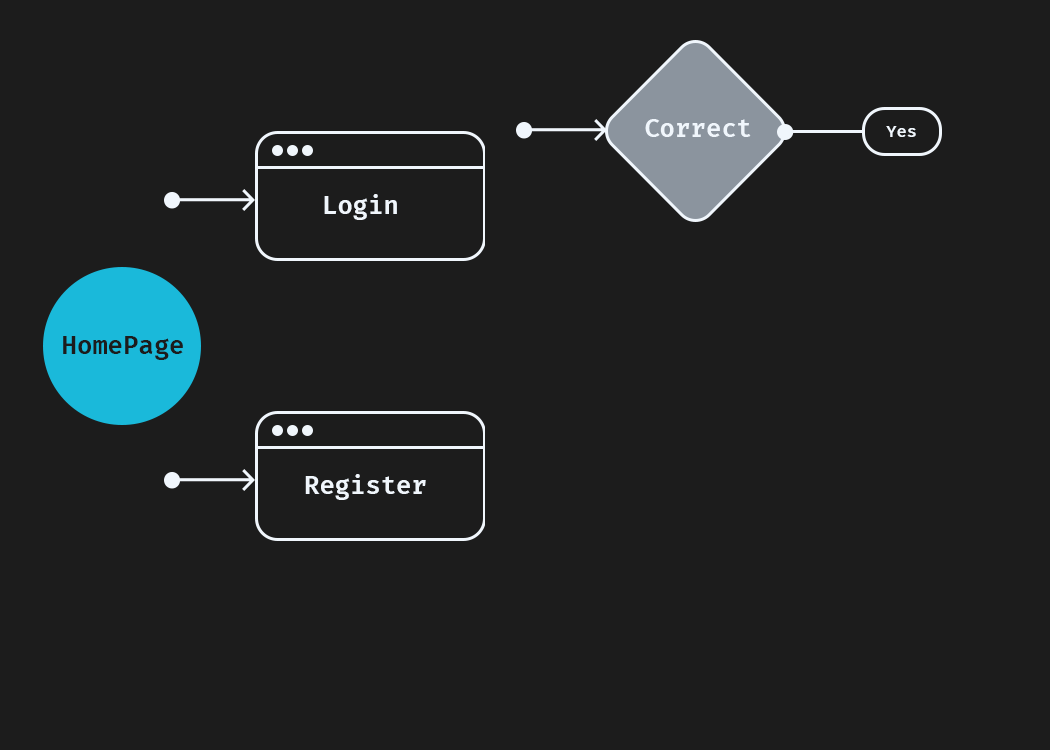
<style>
.page{position:relative;width:1050px;height:750px;background:#1c1c1c}
.page>*{position:absolute;margin:0}
.t1{font:25px "FiraCode-SemiBold";color:#f0f6fc}
.t2{font:16.7px "FiraCode-SemiBold";color:#f0f6fc}
.t3{font:25px "FiraCode-SemiBold";color:#1c1c1c}
</style>
<div class="page">
<p class="t1" style="left:645px;top:119px;width:106px;height:18px">Correct</p>
<p class="t2" style="left:886px;top:126px;width:30px;height:11px">Yes</p>
<p class="t1" style="left:324px;top:194px;width:73px;height:26px">Login</p>
<p class="t3" style="left:63px;top:336px;width:120px;height:24px">HomePage</p>
<p class="t1" style="left:305px;top:474px;width:121px;height:26px">Register</p>
</div>
